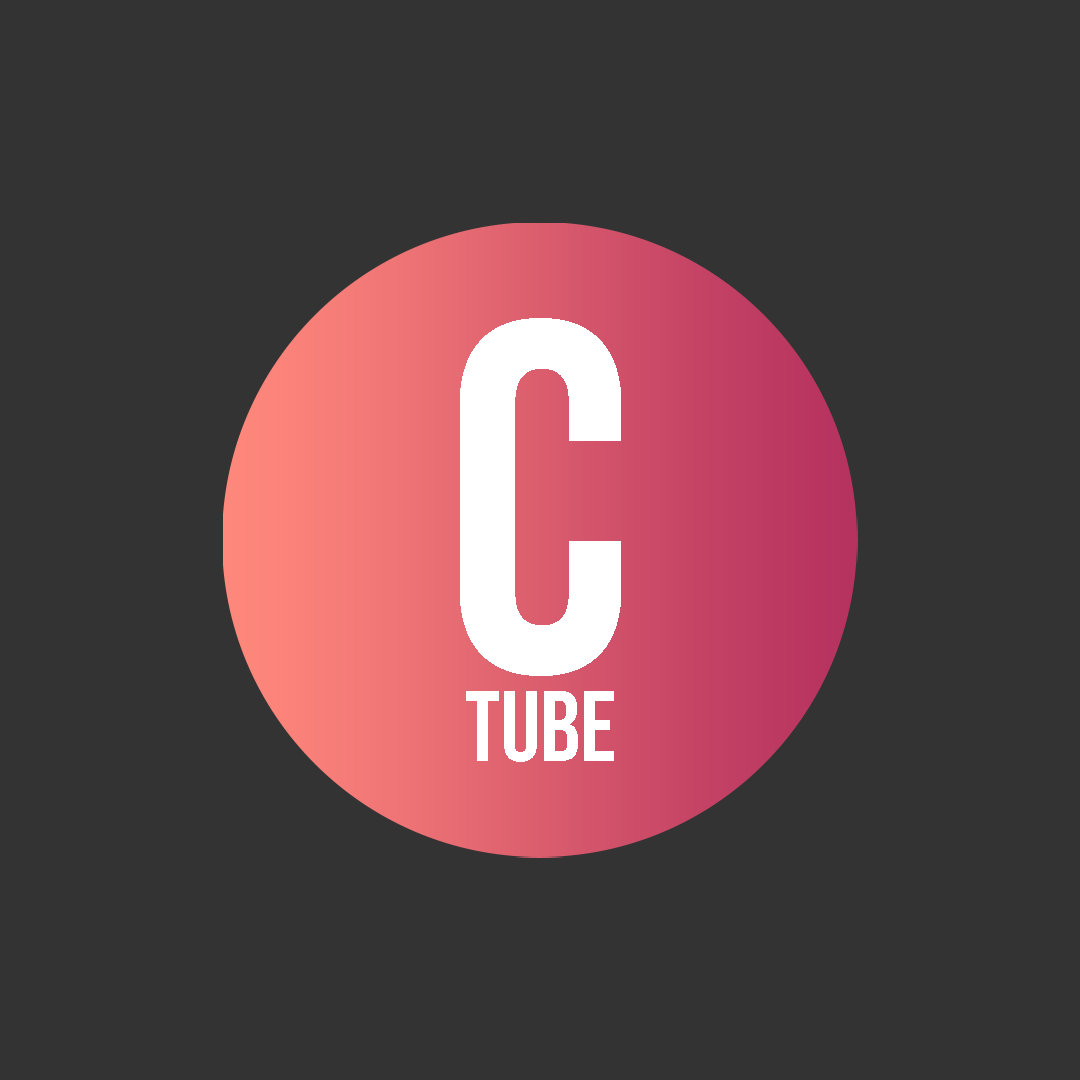
<style>
.page{position:relative;width:1080px;height:1080px;background:#333333}
.page>*{position:absolute;margin:0}
.t1{font:496.4px "BebasNeue-Regular";color:#ffffff}
.t2{font:99.6px "BebasNeue-Regular";color:#ffffff}
</style>
<div class="page">
<p class="t1" style="left:460px;top:318px;width:161px;height:358px">C</p>
<p class="t2" style="left:466px;top:691px;width:148px;height:71px">TUBE</p>
</div>
